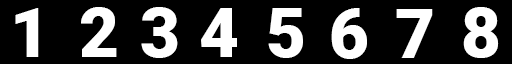
<style>
.page{position:relative;width:512px;height:64px;background:#000000}
.page>*{position:absolute;margin:0}
.t1{font:69.3px "Roboto-Black";color:#ffffff;text-transform:uppercase}
</style>
<div class="page">
<p class="t1" style="left:15px;top:8px;width:24px;height:49px">1</p>
<p class="t1" style="left:81px;top:7px;width:36px;height:50px">2</p>
<p class="t1" style="left:141px;top:7px;width:37px;height:51px">3</p>
<p class="t1" style="left:201px;top:8px;width:36px;height:49px">4</p>
<p class="t1" style="left:268px;top:8px;width:35px;height:50px">5</p>
<p class="t1" style="left:331px;top:8px;width:36px;height:51px">6</p>
<p class="t1" style="left:396px;top:9px;width:37px;height:49px">7</p>
<p class="t1" style="left:463px;top:7px;width:36px;height:51px">8</p>
</div>
